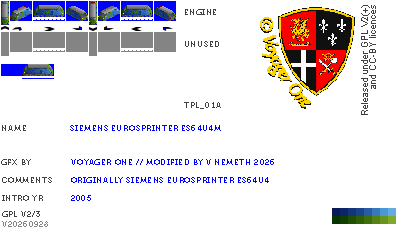
<style>
.page{position:relative;width:400px;height:230px;background:#ffffff}
.page>*{position:absolute;margin:0}
.t1{font:8px "Museo700-Regular";letter-spacing:0.075em;color:#404040;text-transform:uppercase}
.t2{font:8px "Museo700-Regular";letter-spacing:0.075em;color:#0000ff;text-transform:uppercase}
.t3{font:8px "Museo700-Regular";letter-spacing:0.075em;color:#848484;text-transform:uppercase}
</style>
<div class="page">
<p class="t1" style="left:185px;top:9px;width:31px;height:6px">engine</p>
<p class="t1" style="left:185px;top:41px;width:34px;height:6px">unused</p>
<p class="t1" style="left:184px;top:102px;width:37px;height:7px">tpl_01a</p>
<p class="t1" style="left:2px;top:125px;width:24px;height:6px">name</p>
<p class="t2" style="left:70px;top:125px;width:151px;height:6px">Siemens Eurosprinter ES64U4M</p>
<p class="t1" style="left:1px;top:159px;width:30px;height:6px">gfx by</p>
<p class="t2" style="left:71px;top:159px;width:203px;height:6px">voyager one // modified by v nemeth 2026</p>
<p class="t1" style="left:2px;top:177px;width:50px;height:6px">comments</p>
<p class="t2" style="left:71px;top:177px;width:198px;height:6px">originally Siemens EuroSprinter ES64U4</p>
<p class="t1" style="left:2px;top:195px;width:41px;height:6px">intro yr</p>
<p class="t2" style="left:71px;top:195px;width:20px;height:6px">2005</p>
<p class="t3" style="left:2px;top:221px;width:46px;height:6px">v20260928</p>
<p class="t1" style="left:2px;top:211px;width:38px;height:6px">gpl v2/3</p>
</div>
